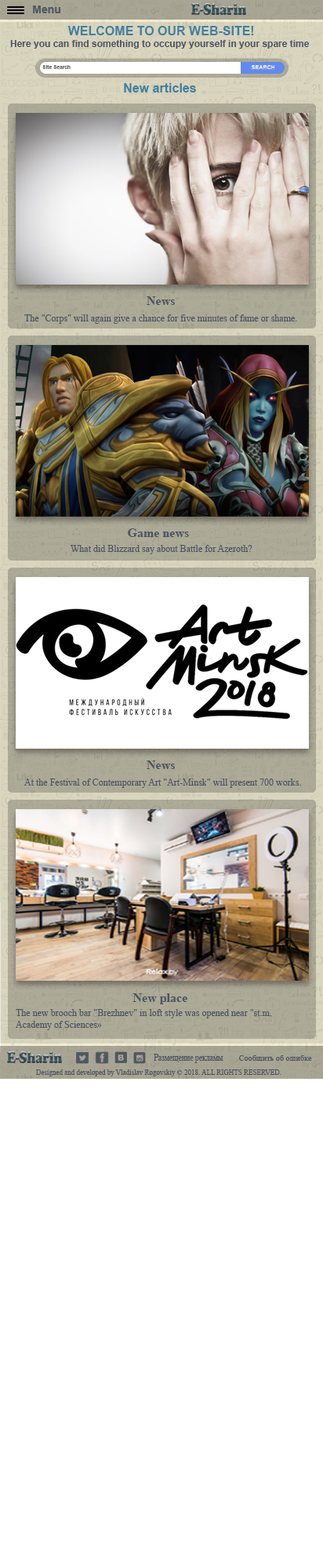
<style>
.page{position:relative;width:323px;height:1568px;background:#ffffff}
.page>*{position:absolute;margin:0}
.t1{font:12.5px "Arial-BoldMT";color:#427f9e}
.t2{font:9.4px "Arial-BoldMT";color:#4c5563}
.t3{font:5px "Arial-BoldMT";color:#716f6f}
.t4{font:12.5px "TimesNewRomanPS-BoldMT";color:#4c5563}
.t5{font:9.4px "TimesNewRomanPSMT";color:#4c5563}
.t6{font:10px "TimesNewRomanPSMT";color:#4c5563;scale:0.76 1}
.t7{font:8.2px "TimesNewRomanPSMT";color:#4c5563}
.t8{font:7.1px "TimesNewRomanPSMT";color:#4c5563}
</style>
<div class="page">
<p class="t1" style="left:67px;top:26px;width:187px;height:9px">WELCOME TO OUR WEB-SITE!</p>
<p class="t2" style="left:10px;top:40px;width:300px;height:9px">Here you can find something to occupy yourself in your spare time</p>
<p class="t3" style="left:42px;top:65px;width:29px;height:4px">Site Search</p>
<p class="t1" style="left:124px;top:83px;width:72px;height:10px">New articles</p>
<p class="t4" style="left:147px;top:296px;width:28px;height:9px">News</p>
<p class="t5" style="left:24px;top:314px;width:273px;height:10px">The "Corps" will again give a chance for five minutes of fame or shame.</p>
<p class="t4" style="left:128px;top:528px;width:61px;height:9px">Game news</p>
<p class="t5" style="left:71px;top:545px;width:181px;height:9px">What did Blizzard say about Battle for Azeroth?</p>
<p class="t4" style="left:147px;top:760px;width:28px;height:9px">News</p>
<p class="t5" style="left:24px;top:779px;width:277px;height:9px">At the Festival of Contemporary Art "Art-Minsk" will present 700 works.</p>
<p class="t4" style="left:132px;top:993px;width:55px;height:11px">New place</p>
<p class="t5" style="left:16px;top:1009px;width:256px;height:21px">The new brooch bar "Brezhnev" in loft style was opened near "st.m. Academy of Sciences»</p>
<p class="t6" style="left:154px;top:1054px;width:69px;height:9px">Размещение рекламы</p>
<p class="t7" style="left:239px;top:1055px;width:73px;height:7px">Сообщить об ошибке</p>
<p class="t8" style="left:36px;top:1069px;width:245px;height:7px">Designed and developed by Vladislav Rogovskiy © 2018. ALL RIGHTS RESERVED.</p>
</div>
